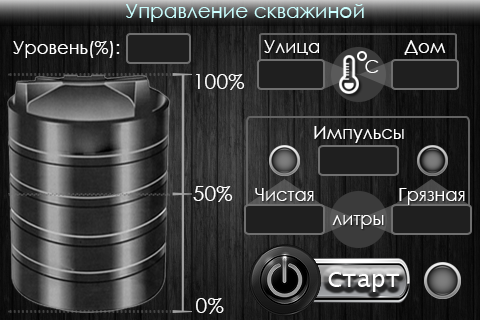
<style>
.page{position:relative;width:480px;height:320px}
.page>*{position:absolute;margin:0}
.t1{font:20px "KZCenturyGothic";color:#cbffff}
.t2{font:18px "KZCenturyGothic";color:#ffffff}
.t3{font:21.3px "KZCenturyGothic";color:#ffffff}
</style>
<div class="page">
<p class="t1" style="left:126px;top:4px;width:238px;height:18px">Управление скважиной</p>
<p class="t2" style="left:13px;top:41px;width:107px;height:17px">Уровень(%):</p>
<p class="t2" style="left:264px;top:40px;width:55px;height:15px">Улица</p>
<p class="t2" style="left:404px;top:40px;width:42px;height:15px">Дом</p>
<p class="t3" style="left:195px;top:74px;width:50px;height:16px">100%</p>
<p class="t2" style="left:314px;top:126px;width:90px;height:17px">Импульсы</p>
<p class="t3" style="left:193px;top:186px;width:40px;height:16px">50%</p>
<p class="t2" style="left:255px;top:188px;width:59px;height:13px">Чистая</p>
<p class="t2" style="left:399px;top:188px;width:66px;height:17px">Грязная</p>
<p class="t2" style="left:332px;top:215px;width:52px;height:14px">литры</p>
<p class="t3" style="left:196px;top:298px;width:28px;height:16px">0%</p>
</div>
